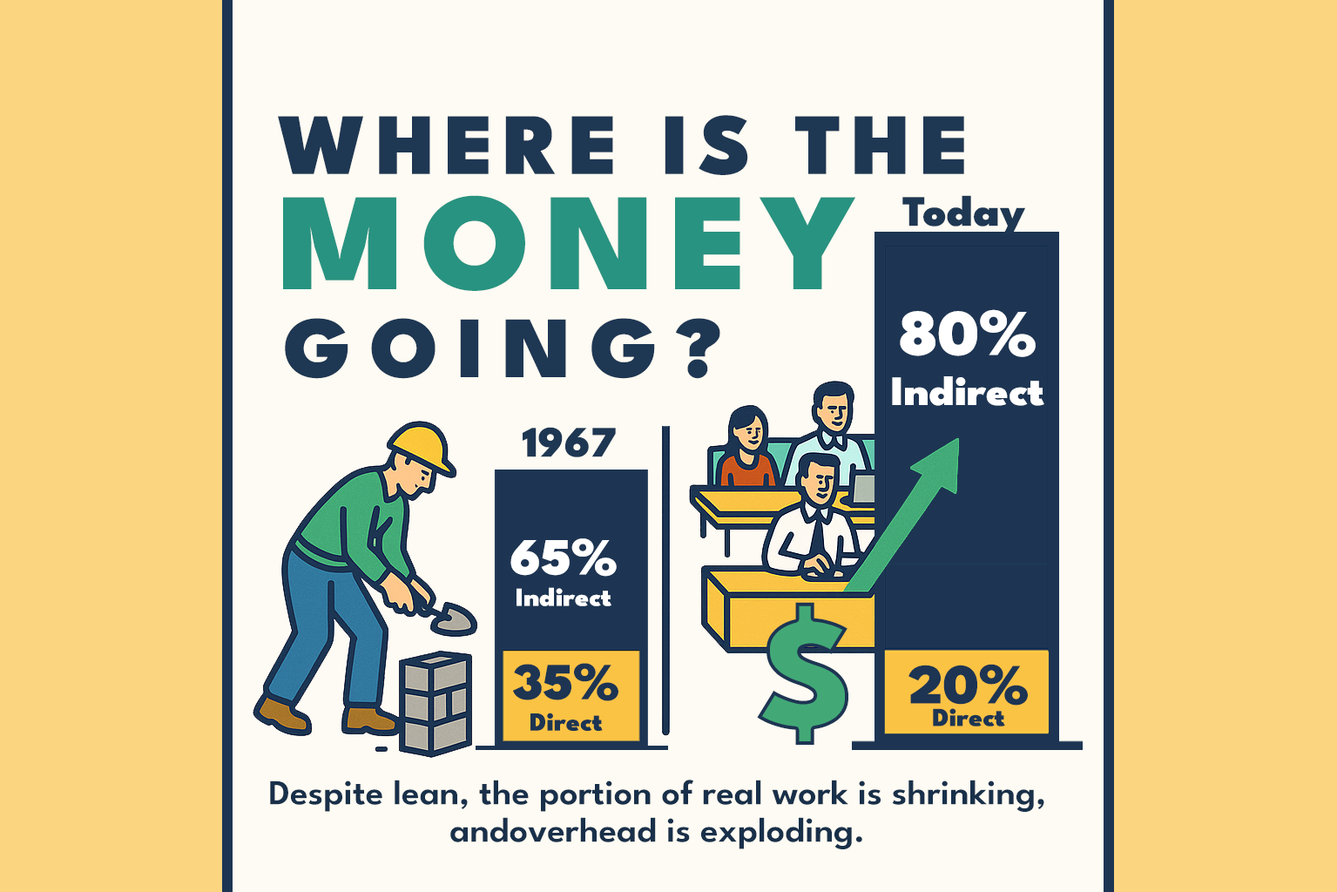
<style>
.page{position:relative;width:1337px;height:892px;background:#fdfbf3}
.page>*{position:absolute;margin:0}
.t1{font:87.1px "LeagueSpartan-Black";letter-spacing:0.1em;color:#1e3753;scale:1.05 1}
.t2{font:138.8px "LeagueSpartan-Black";letter-spacing:0.1em;color:#289381;scale:1.05 1}
.t3{font:43.5px "LeagueSpartan-Black";color:#1e3753;scale:1.05 1}
.t4{font:87.1px "LeagueSpartan-Black";letter-spacing:0.2em;color:#1e3753;scale:1.05 1}
.t5{font:41.8px "LeagueSpartan-Black";color:#ffffff;scale:1.05 1}
.t6{font:65.3px "LeagueSpartan-Black";color:#ffffff;scale:1.05 1}
.t7{font:26.1px "LeagueSpartan-Black";color:#ffffff;scale:1.05 1}
.t8{font:52.3px "LeagueSpartan-Black";color:#ffffff;scale:1.05 1}
.t9{font:163.3px "LeagueSpartan-Black";letter-spacing:0.2em;color:#42a976;scale:1.05 1}
.t10{font:26.1px "LeagueSpartan-Black";color:#1d3553;scale:1.05 1}
.t11{font:52.3px "LeagueSpartan-Black";color:#1d3553;scale:1.05 1}
.t12{font:26.1px/22.6px "LeagueSpartan-Black";color:#1d3553;scale:1.05 1}
.t13{font:56.6px/22.6px "LeagueSpartan-Black";color:#1d3553;scale:1.05 1}
.t14{font:34.8px/37.5px "LeagueSpartan-SemiBold";color:#19304a;scale:1.05 1}
</style>
<div class="page">
<p class="t1" style="left:278px;top:115px;width:686px;height:60px">WHERE IS THE</p>
<p class="t2" style="left:283px;top:195px;width:572px;height:96px">MONEY</p>
<p class="t3" style="left:902px;top:195px;width:124px;height:40px">Today</p>
<p class="t4" style="left:285px;top:318px;width:435px;height:61px">GOING?</p>
<p class="t5" style="left:892px;top:309px;width:152px;height:97px;text-align:center"><span class="t6">80%<br></span>Indirect</p>
<p class="t3" style="left:523px;top:427px;width:93px;height:30px">1967</p>
<p class="t7" style="left:510px;top:538px;width:107px;height:68px;text-align:center"><span class="t8">65%<br></span>Indirect</p>
<p class="t9" style="left:757px;top:602px;width:91px;height:143px">$</p>
<p class="t10" style="left:513px;top:663px;width:105px;height:68px;text-align:center"><span class="t11">35%<br></span>Direct</p>
<p class="t12" style="left:908px;top:664px;width:120px;height:62px;text-align:center"><span class="t13">20%<br></span>Direct</p>
<p class="t14" style="left:270px;top:780px;width:774px;height:69px;text-align:center">Despite lean, the portion of real work is shrinking, <br>andoverhead is exploding.</p>
</div>
